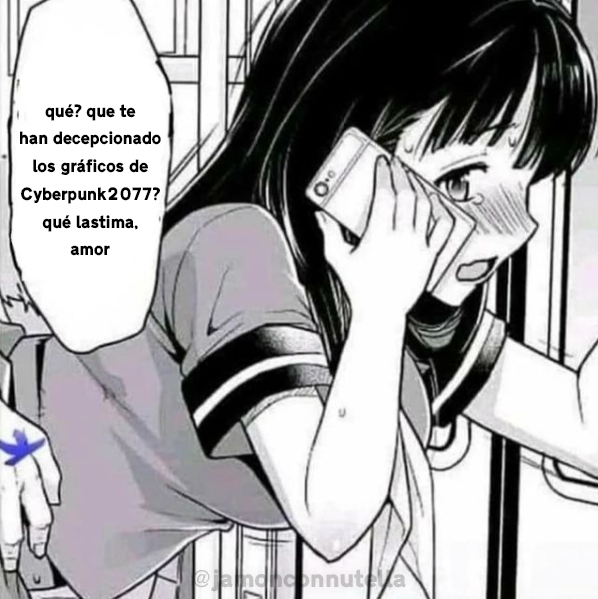
<style>
.page{position:relative;width:598px;height:599px}
.page>*{position:absolute;margin:0}
.t1{font:18.7px "TrafficTypeW01-SpainD";color:#000000;scale:0.94 1}
</style>
<div class="page">
<p class="t1" style="left:20px;top:104px;width:141px;height:152px;text-align:center">qué? que te<br>han decepcionado<br>los gráficos de<br>Cyberpunk2077?<br>qué lastima,<br>amor</p>
</div>
